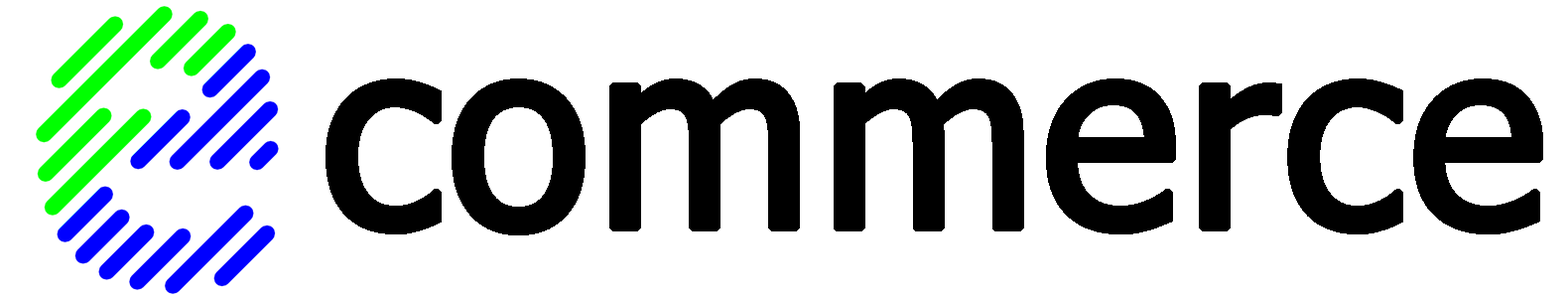
<style>
.page{position:relative;width:1568px;height:298px;background:#ffffff}
.page>*{position:absolute;margin:0}
.t1{font:258px "Tahoma";color:#000000;font-weight:bold}
</style>
<div class="page">
<p class="t1" style="left:326px;top:78px;width:1217px;height:157px">commerce</p>
</div>
